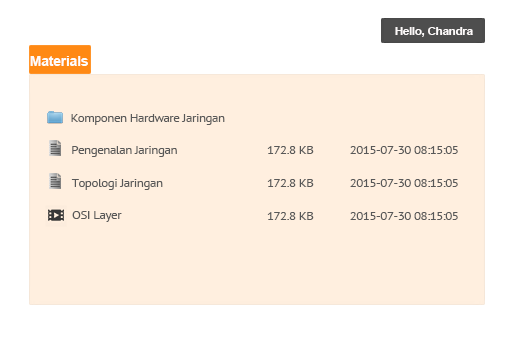
<style>
.page{position:relative;width:511px;height:338px;background:#ffefdf}
.page>*{position:absolute;margin:0}
.t1{font:11px "Arial-BoldMT";letter-spacing:-0.025em;color:#fdfafa;scale:1.06 1}
.t2{font:13.5px "Arial-BoldMT";letter-spacing:-0.025em;color:#fdfdfc;scale:1.06 1}
.t3{font:12px "PTSans-Regular";letter-spacing:-0.025em;color:#585858;scale:1.06 1}
</style>
<div class="page">
<p class="t1" style="left:395px;top:27px;width:78px;height:10px">Hello, Chandra</p>
<p class="t2" style="left:30px;top:56px;width:58px;height:10px">Materials</p>
<p class="t3" style="left:71px;top:114px;width:154px;height:11px">Komponen Hardware Jaringan</p>
<p class="t3" style="left:72px;top:146px;width:105px;height:11px">Pengenalan Jaringan</p>
<p class="t3" style="left:267px;top:146px;width:47px;height:8px">172.8 KB</p>
<p class="t3" style="left:350px;top:146px;width:108px;height:8px">2015-07-30 08:15:05</p>
<p class="t3" style="left:71px;top:179px;width:92px;height:11px">Topologi Jaringan</p>
<p class="t3" style="left:267px;top:179px;width:47px;height:8px">172.8 KB</p>
<p class="t3" style="left:350px;top:179px;width:108px;height:8px">2015-07-30 08:15:05</p>
<p class="t3" style="left:72px;top:211px;width:50px;height:11px">OSI Layer</p>
<p class="t3" style="left:267px;top:212px;width:47px;height:8px">172.8 KB</p>
<p class="t3" style="left:350px;top:212px;width:108px;height:8px">2015-07-30 08:15:05</p>
</div>
